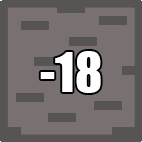
<style>
.page{position:relative;width:142px;height:142px;background:#797171}
.page>*{position:absolute;margin:0}
.t1{font:51px "Impact";color:#ffffff}
</style>
<div class="page">
<p class="t1" style="left:40px;top:51px;width:61px;height:42px">-18</p>
</div>
